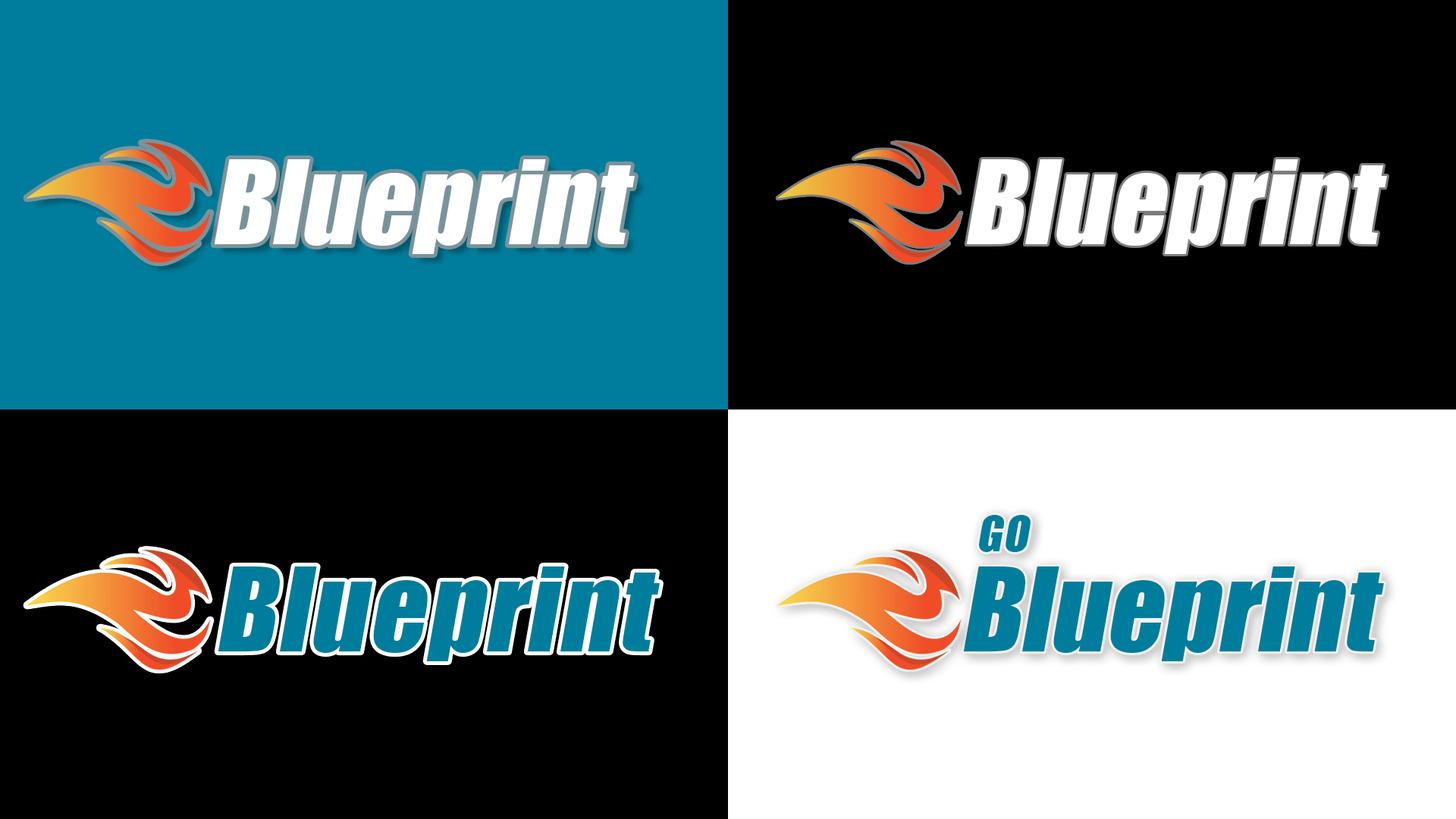
<style>
.page{position:relative;width:1456px;height:819px;background:#000000}
.page>*{position:absolute;margin:0}
.t1{font:107.7px "Impact";color:#ffffff;font-style:italic}
.t2{font:45.5px "Impact";letter-spacing:0.025em;color:#007d9c;font-style:italic}
.t3{font:107.7px "Impact";letter-spacing:0.025em;color:#007d9c;font-style:italic}
.t4{font:107.7px "Impact";color:#007d9c;font-style:italic}
</style>
<div class="page">
<p class="t1" style="left:214px;top:159px;width:421px;height:95px">Blueprint</p>
<p class="t1" style="left:966px;top:159px;width:421px;height:95px">Blueprint</p>
<p class="t2" style="left:979px;top:515px;width:52px;height:37px">GO</p>
<p class="t3" style="left:218px;top:566px;width:442px;height:95px">Blueprint</p>
<p class="t4" style="left:963px;top:566px;width:421px;height:95px">Blueprint</p>
</div>
